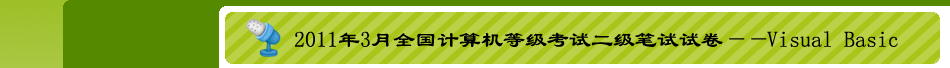
<style>
.page{position:relative;width:950px;height:68px;background:#bad148}
.page>*{position:absolute;margin:0}
.t1{font:22px "LiSu";color:#000000}
</style>
<div class="page">
<p class="t1" style="left:295px;top:31px;width:603px;height:16px">2011年3月全国计算机等级考试二级笔试试卷——Visual Basic</p>
</div>
